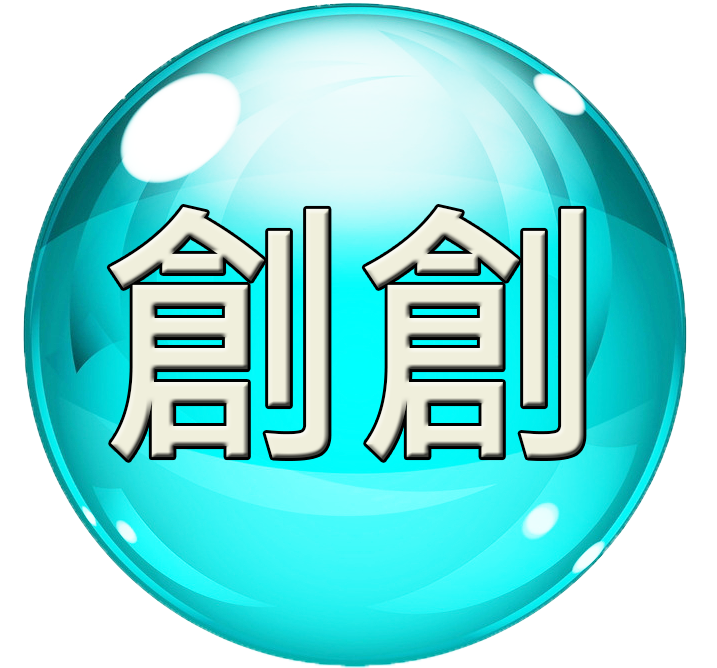
<style>
.page{position:relative;width:717px;height:668px;background:#ffffff}
.page>*{position:absolute;margin:0}
.t1{font:283.1px "MicrosoftJhengHeiBold";color:#f0efdc;scale:0.9 1}
</style>
<div class="page">
<p class="t1" style="left:109px;top:206px;width:475px;height:254px">創創</p>
</div>
